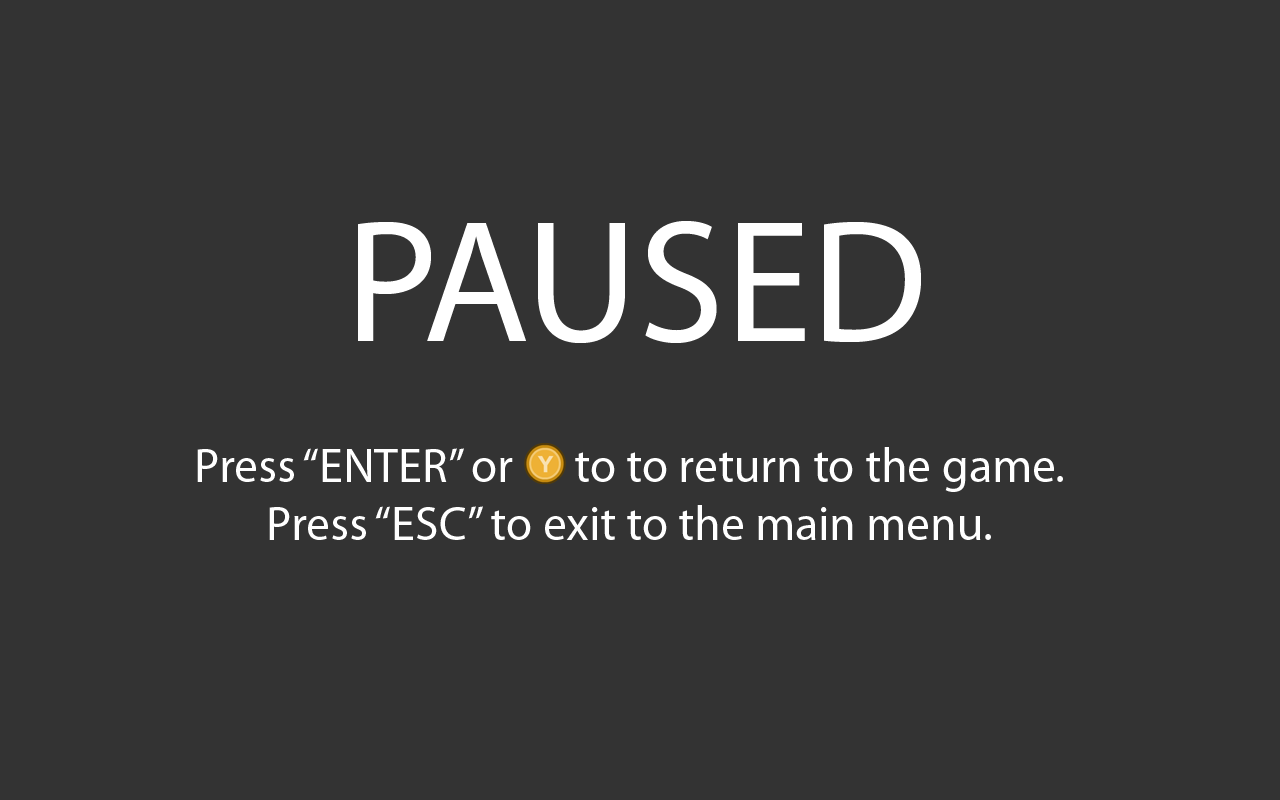
<style>
.page{position:relative;width:1280px;height:800px;background:#333333}
.page>*{position:absolute;margin:0}
.t1{font:175px "MyriadPro-Regular";color:#ffffff}
.t2{font:48px "MyriadPro-Regular";color:#ffffff}
</style>
<div class="page">
<p class="t1" style="left:358px;top:221px;width:563px;height:122px">PAUSED</p>
<p class="t2" style="left:197px;top:447px;width:866px;height:93px;text-align:center">Press “ENTER” or      to to return to the game.<br>Press “ESC” to exit to the main menu.</p>
</div>
